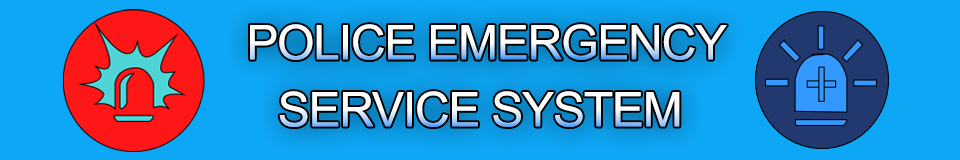
<style>
.page{position:relative;width:960px;height:160px;background:#0ea7f6}
.page>*{position:absolute;margin:0}
.t1{font:48px "ArialMT";letter-spacing:-0.025em;color:#ffffff}
</style>
<div class="page">
<p class="t1" style="left:250px;top:24px;width:477px;height:36px">POLICE EMERGENCY</p>
<p class="t1" style="left:279px;top:91px;width:401px;height:36px">SERVICE SYSTEM</p>
</div>
